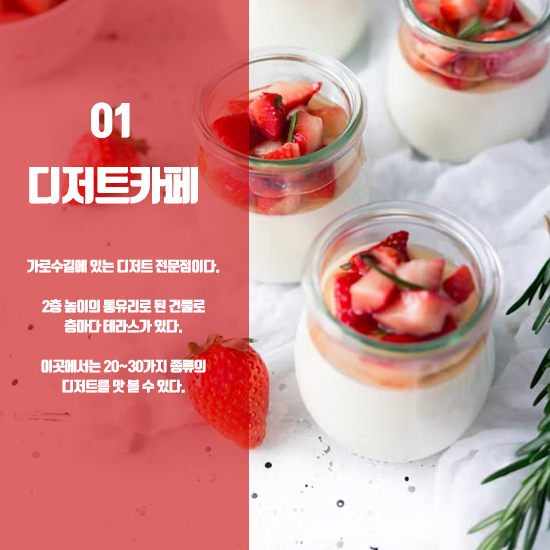
<style>
.page{position:relative;width:550px;height:550px}
.page>*{position:absolute;margin:0}
.t1{font:40px "TmonMonsoriBlack";letter-spacing:-0.05em;color:#ffffff}
.t2{font:14px "TmonMonsoriBlack";letter-spacing:-0.05em;color:#ffffff}
</style>
<div class="page">
<p class="t1" style="left:91px;top:102px;width:39px;height:36px">01</p>
<p class="t1" style="left:29px;top:167px;width:169px;height:37px">디저트카페</p>
<p class="t2" style="left:27px;top:259px;width:193px;height:14px">가로수길에 있는 디저트 전문점이다.</p>
<p class="t2" style="left:42px;top:299px;width:163px;height:14px">2층 높이의 통유리로 된 건물로</p>
<p class="t2" style="left:64px;top:319px;width:118px;height:14px">층마다 테라스가 있다.</p>
<p class="t2" style="left:41px;top:359px;width:165px;height:14px">이곳에서는 20~30가지 종류의</p>
<p class="t2" style="left:62px;top:379px;width:123px;height:14px">디저트를 맛 볼 수 있다.</p>
</div>
